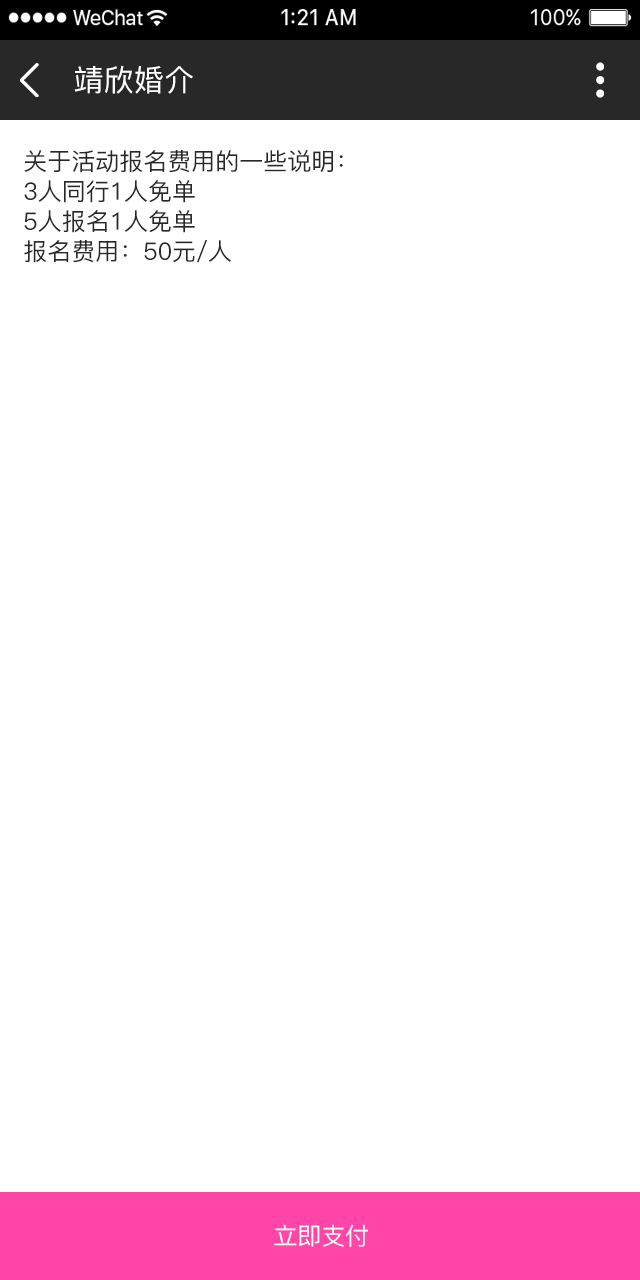
<style>
.page{position:relative;width:640px;height:1280px;background:#ffffff}
.page>*{position:absolute;margin:0}
.t1{font:30px "PingFang-SC-Medium";letter-spacing:0.01em;color:#ffffff;text-transform:uppercase}
.t2{font:24px/30px "PingFang-SC-Medium";color:#282828;text-transform:uppercase}
.t3{font:24px "PingFang-SC-Medium";color:#ffffff;text-transform:uppercase}
</style>
<div class="page">
<p class="t1" style="left:74px;top:65px;width:119px;height:29px">靖欣婚介</p>
<p class="t2" style="left:24px;top:150px;width:319px;height:113px;text-align:justify">关于活动报名费用的一些说明：<br>3人同行1人免单<br>5人报名1人免单<br>报名费用：50元/人</p>
<p class="t3" style="left:274px;top:1224px;width:94px;height:23px">立即支付</p>
</div>
